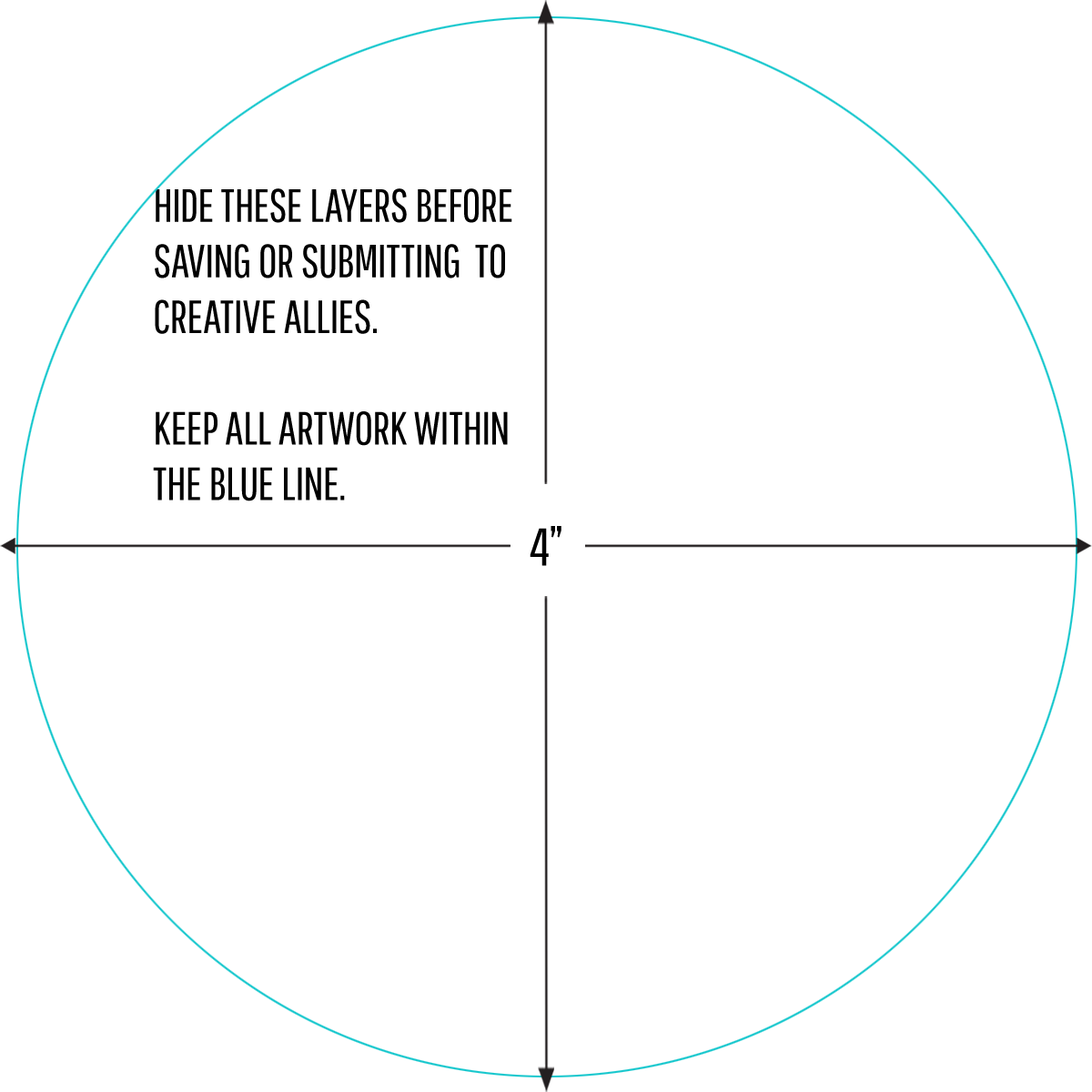
<style>
.page{position:relative;width:1092px;height:1092px;background:#ffffff}
.page>*{position:absolute;margin:0}
.t1{font:46.4px "PathwayGothicOne-Book";color:#000000;text-transform:uppercase}
.t2{font:53.1px "PathwayGothicOne-Book";color:#000000;text-transform:uppercase}
</style>
<div class="page">
<p class="t1" style="left:153px;top:188px;width:359px;height:313px">Hide these layers before<br>saving or submitting  to <br>creative allies. <br><br>keep all artwork within<br>the blue line.</p>
<p class="t2" style="left:530px;top:526px;width:31px;height:40px">4”</p>
</div>
